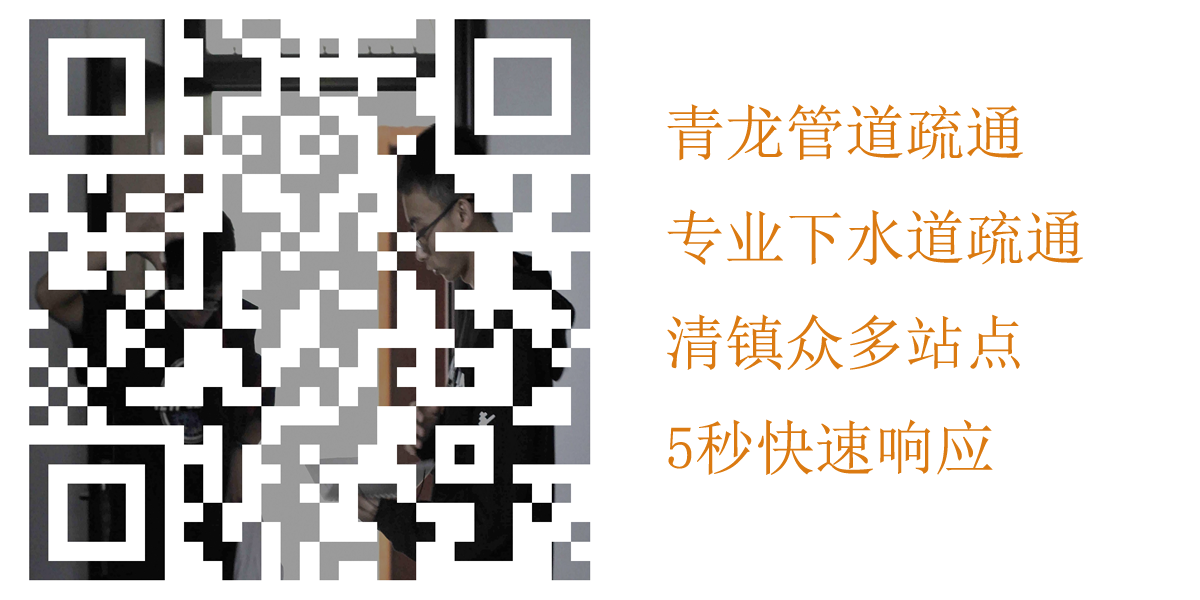
<style>
.page{position:relative;width:1200px;height:600px;background:#ffffff}
.page>*{position:absolute;margin:0}
.t1{font:60px "SimSun";color:#db7a11}
</style>
<div class="page">
<p class="t1" style="left:667px;top:104px;width:416px;height:371px">青龙管道疏通<br>专业下水道疏通<br>清镇众多站点<br>5秒快速响应</p>
</div>
